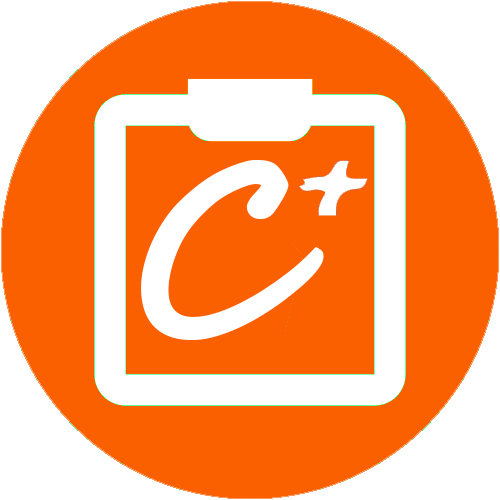
<style>
.page{position:relative;width:500px;height:500px;background:#fa6000}
.page>*{position:absolute;margin:0}
.t1{font:233.3px "SegoeScript-Bold";color:#ffffff}
</style>
<div class="page">
<p class="t1" style="left:141px;top:160px;width:183px;height:180px">C</p>
</div>
